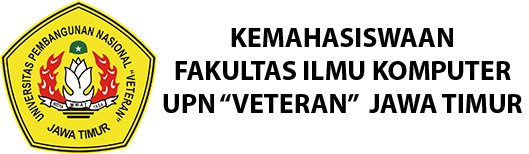
<style>
.page{position:relative;width:529px;height:154px;background:#ffffff}
.page>*{position:absolute;margin:0}
.t1{font:27.4px "MyriadPro-Bold";color:#000000}
</style>
<div class="page">
<p class="t1" style="left:163px;top:28px;width:359px;height:85px;text-align:center">KEMAHASISWAAN<br>FAKULTAS ILMU KOMPUTER<br>UPN “VETERAN”  JAWA TIMUR</p>
</div>
